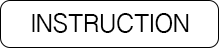
<style>
.page{position:relative;width:219px;height:48px;background:#ffffff}
.page>*{position:absolute;margin:0}
.t1{font:24px "SinhalaSangamMN-Bold";color:#000000}
</style>
<div class="page">
<p class="t1" style="left:32px;top:13px;width:157px;height:20px">INSTRUCTION</p>
</div>
